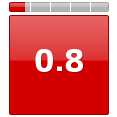
<style>
.page{position:relative;width:117px;height:117px;background:#d40000}
.page>*{position:absolute;margin:0}
.t1{font:36px "Colaborate-Bold";color:#ffffff;text-transform:uppercase}
</style>
<div class="page">
<p class="t1" style="left:35px;top:49px;width:48px;height:23px">0.8</p>
</div>
